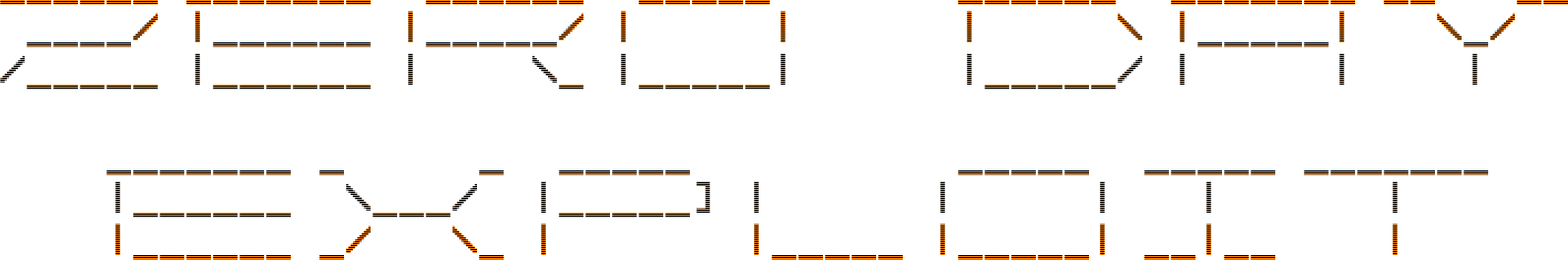
<style>
.page{position:relative;width:1568px;height:260px;background:#ffffff}
.page>*{position:absolute;margin:0}
.t1{font:35.5px "Terminal"}
</style>
<div class="page">
<p class="t1" style="left:0px;top:0px;width:1568px;height:260px;text-align:center">______ _______  ______  _____       ______  _______ __   __<br> ____/ |______ |_____/ |     |      |     \ |_____|   \_/  <br>/_____ |______ |    \_ |_____|      |_____/ |     |    |   <br>                                                              <br>   _______ _     _  _____          _____  _____ _______  <br>   |______  \___/  |_____] |      |     |   |      |     <br>   |______ _/   \_ |       |_____ |_____| __|__    |</p>
</div>
